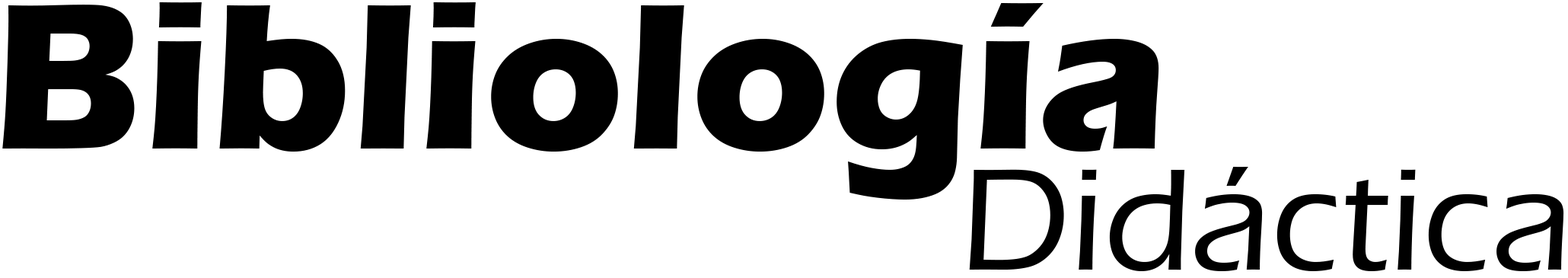
<style>
.page{position:relative;width:1568px;height:278px;background:#ffffff}
.page>*{position:absolute;margin:0}
.t1{font:214.8px "ErasITC-Bold";color:#000000}
.t2{font:149px "ErasITC-Medium";color:#000000}
</style>
<div class="page">
<p class="t1" style="left:2px;top:2px;width:1157px;height:197px">Bibliología</p>
<p class="t2" style="left:969px;top:167px;width:595px;height:104px">Didáctica</p>
</div>
